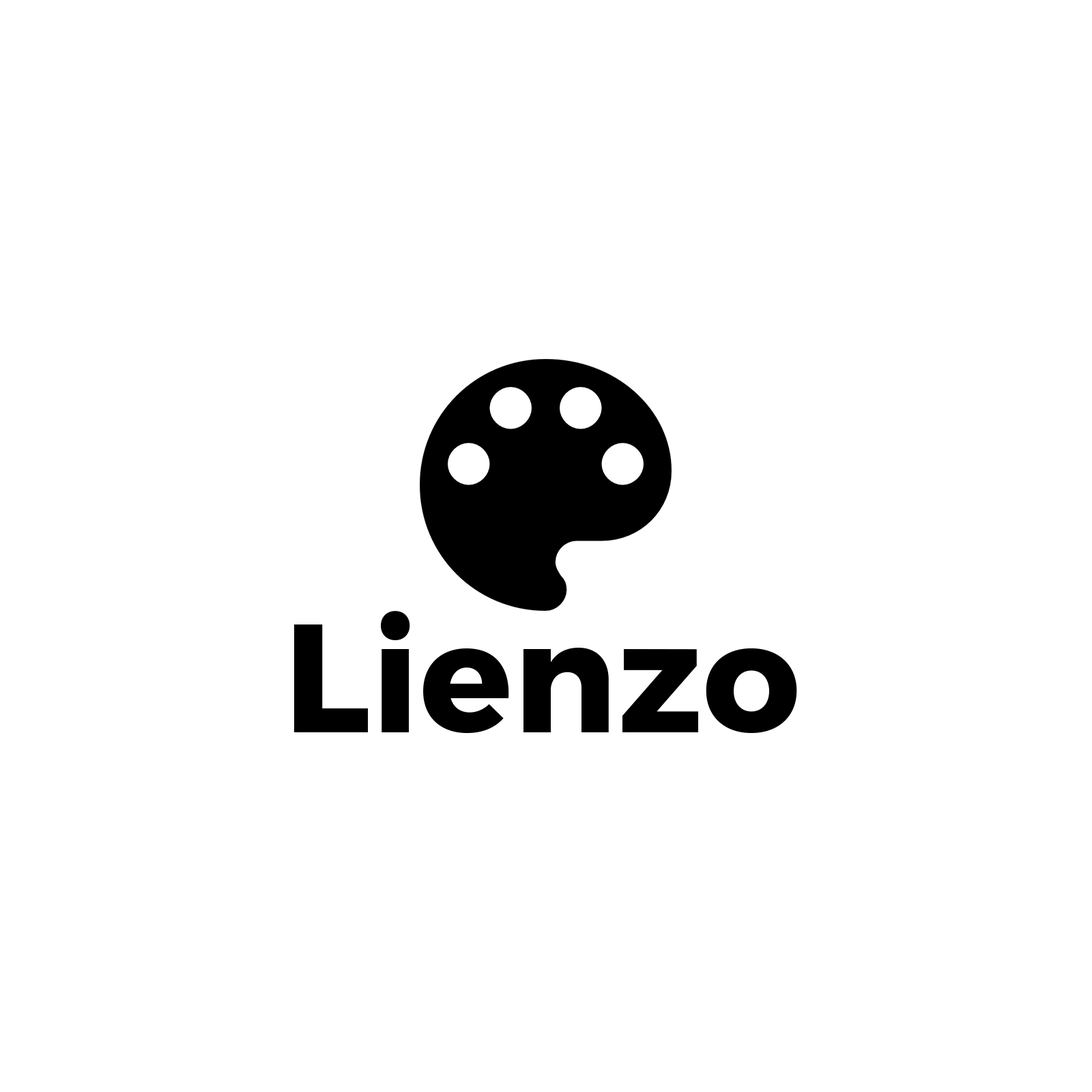
<style>
.page{position:relative;width:1092px;height:1092px;background:#ffffff}
.page>*{position:absolute;margin:0}
.t1{font:153.6px "Montserrat-Bold";letter-spacing:0.005em;color:#000000}
</style>
<div class="page">
<p class="t1" style="left:294px;top:611px;width:503px;height:123px">Lienzo</p>
</div>
